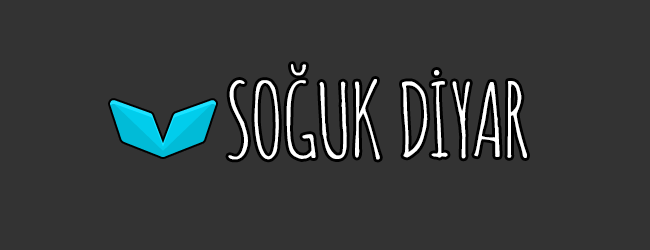
<style>
.page{position:relative;width:650px;height:250px;background:#333333}
.page>*{position:absolute;margin:0}
.t1{font:100px "AmaticSC-Regular";color:#ffffff}
</style>
<div class="page">
<p class="t1" style="left:228px;top:64px;width:299px;height:96px">SOĞUK DİYAR</p>
</div>
